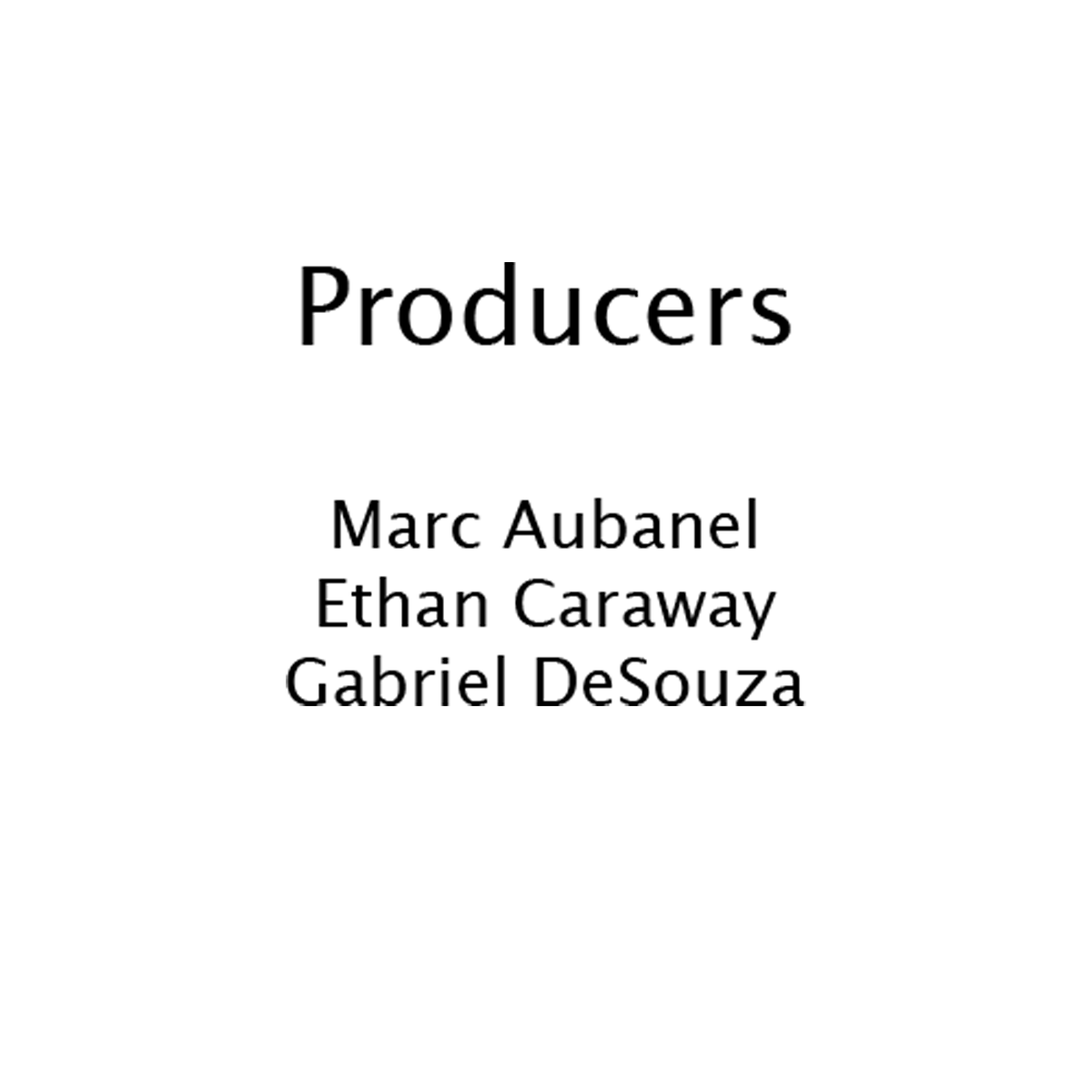
<style>
.page{position:relative;width:1092px;height:1092px;background:#ffffff}
.page>*{position:absolute;margin:0}
.t1{font:65.5px "LucidaGrande";color:#000000}
.t2{font:104.8px "LucidaGrande";color:#d3a15a}
.t3{font:104.8px "LucidaGrande";color:#000000}
</style>
<div class="page">
<p class="t1" style="left:286px;top:262px;width:520px;height:444px;text-align:center"><span class="t2"><br><br></span><span class="t3">Producers<br><br></span>Marc Aubanel<br>Ethan Caraway<br>Gabriel DeSouza</p>
</div>
